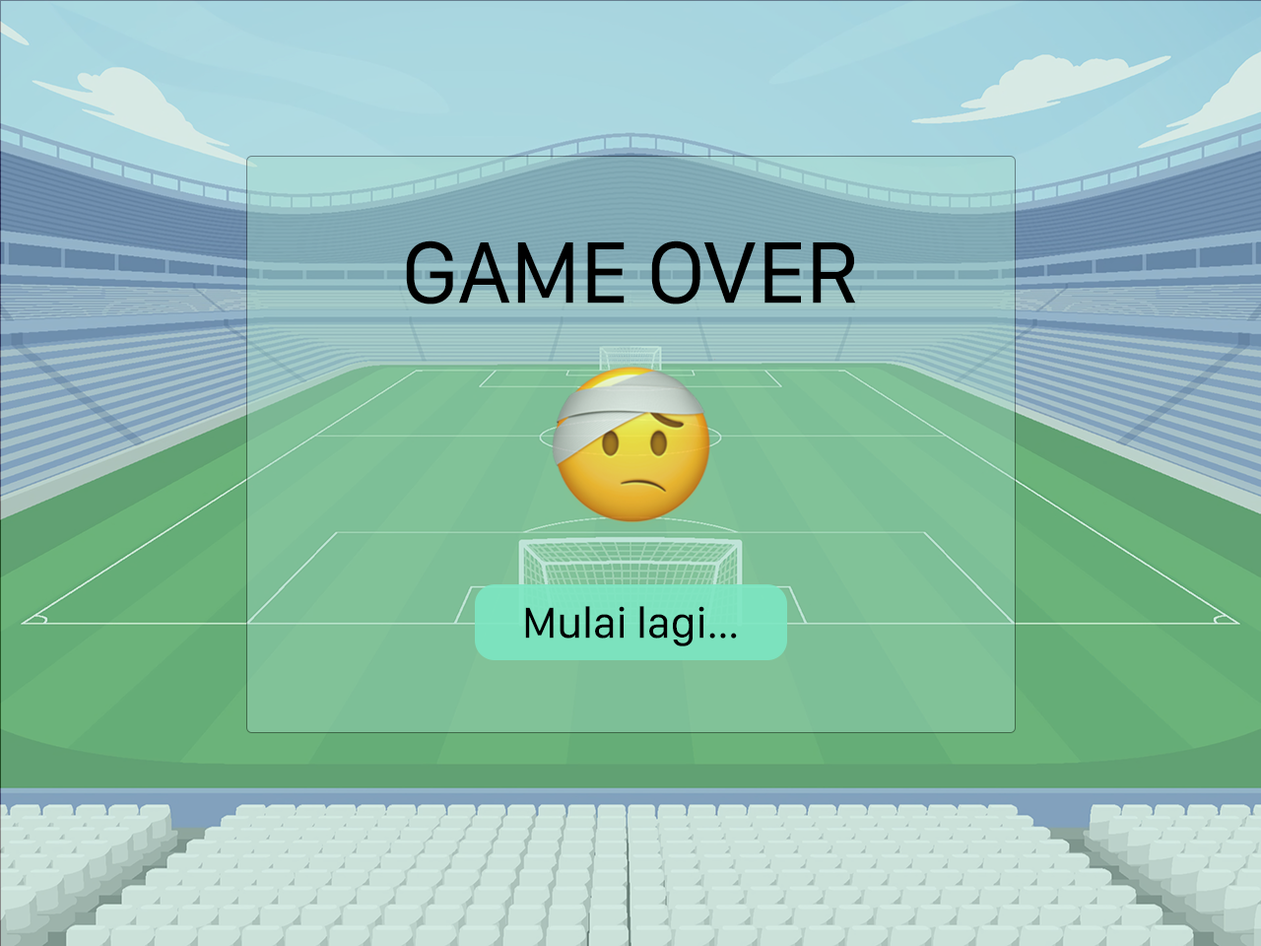
<style>
.page{position:relative;width:1261px;height:946px}
.page>*{position:absolute;margin:0}
.t1{font:90.3px "SFCompactDisplay-Regular";color:#000000}
.t2{font:45.1px "SFCompactDisplay-Regular";color:#000000}
</style>
<div class="page">
<p class="t1" style="left:406px;top:240px;width:449px;height:64px">GAME OVER</p>
<p class="t2" style="left:525px;top:606px;width:212px;height:40px">Mulai lagi...</p>
</div>
